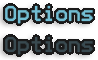
<style>
.page{position:relative;width:98px;height:60px;background:#1a1a1a}
.page>*{position:absolute;margin:0}
.t1{font:17px "VHSGothic";color:#73bed3}
</style>
<div class="page">
<p class="t1" style="left:5px;top:5px;width:88px;height:19px">Options</p>
</div>
